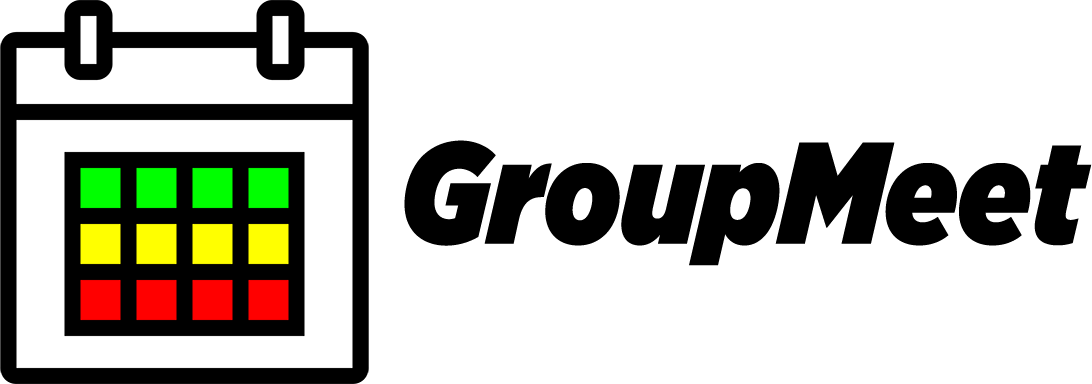
<style>
.page{position:relative;width:1092px;height:384px;background:#ffffff}
.page>*{position:absolute;margin:0}
.t1{font:144px "GothamNarrow-UltraItalic";color:#000000;scale:0.95 1}
</style>
<div class="page">
<p class="t1" style="left:404px;top:140px;width:688px;height:126px">GroupMeet</p>
</div>
